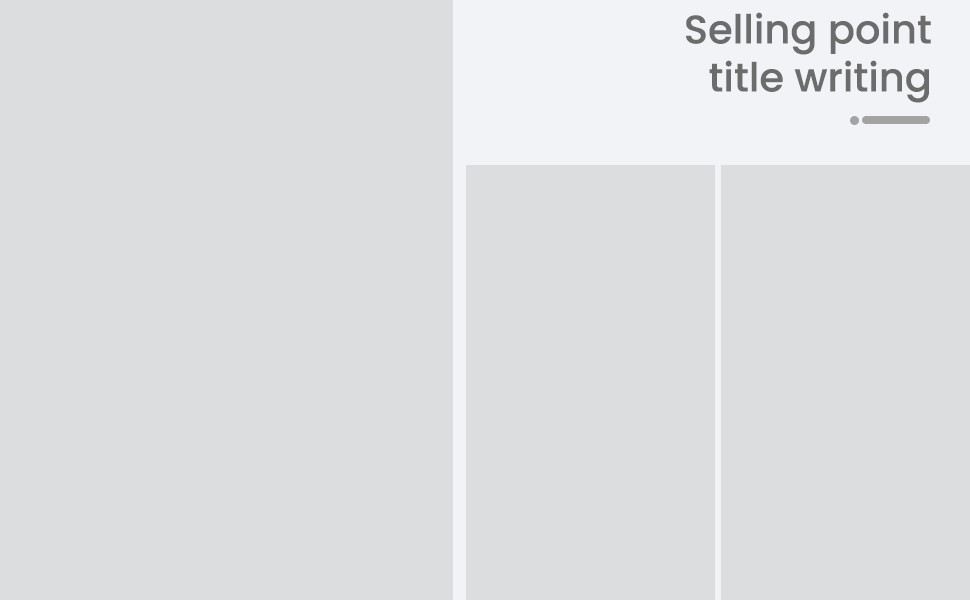
<style>
.page{position:relative;width:970px;height:600px;background:#dcdddf}
.page>*{position:absolute;margin:0}
.t1{font:40px "Poppins-Medium";color:#6c6c6c}
</style>
<div class="page">
<p class="t1" style="left:686px;top:12px;width:245px;height:91px;text-align:right">Selling point<br>title writing</p>
</div>
